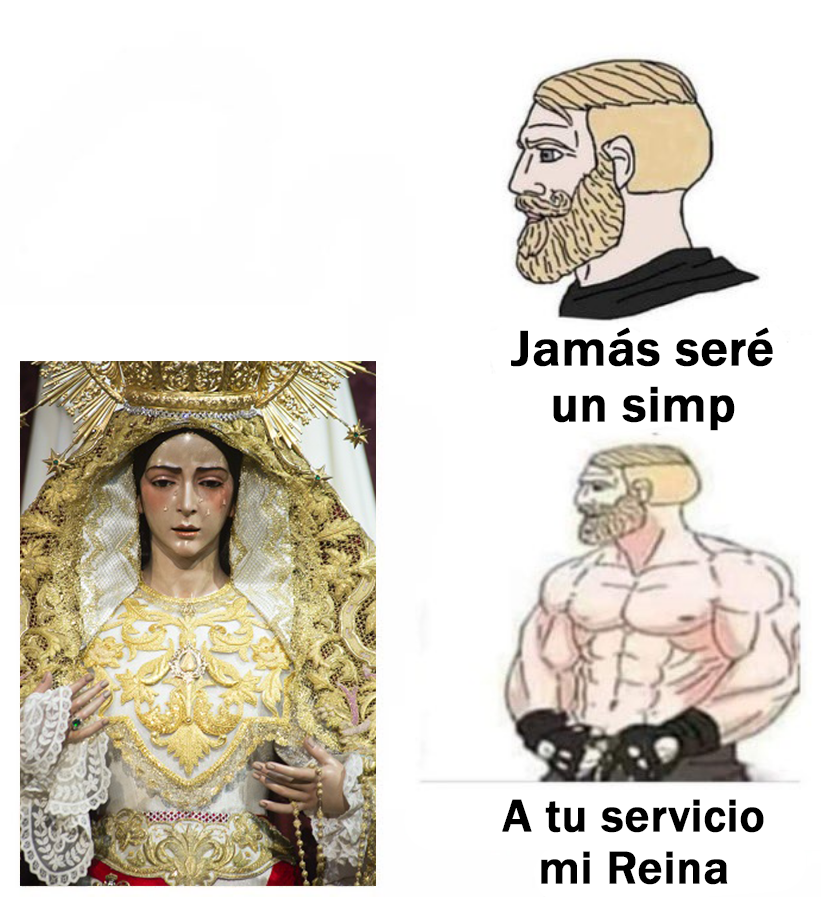
<style>
.page{position:relative;width:821px;height:897px;background:#ffffff}
.page>*{position:absolute;margin:0}
.t1{font:51.3px "FranklinGothic-Medium";color:#000000;font-weight:bold}
.t2{font:47.2px "FranklinGothic-Medium";color:#000000;font-weight:bold}
</style>
<div class="page">
<p class="t1" style="left:511px;top:327px;width:262px;height:104px;text-align:center">Jamás seré<br>un simp</p>
<p class="t2" style="left:502px;top:799px;width:262px;height:86px;text-align:center">A tu servicio<br>mi Reina</p>
</div>
